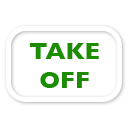
<style>
.page{position:relative;width:128px;height:128px;background:#ffffff}
.page>*{position:absolute;margin:0}
.t1{font:24px "GillSans-Bold";color:#1c8c02}
</style>
<div class="page">
<p class="t1" style="left:29px;top:43px;width:70px;height:45px;text-align:center">TAKE<br>OFF</p>
</div>
